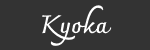
<style>
.page{position:relative;width:150px;height:50px;background:#333333}
.page>*{position:absolute;margin:0}
.t1{font:25px "Charmonman-Bold";letter-spacing:-0.02em;color:#ffffff}
</style>
<div class="page">
<p class="t1" style="left:42px;top:5px;width:70px;height:41px">Kyoka</p>
</div>
